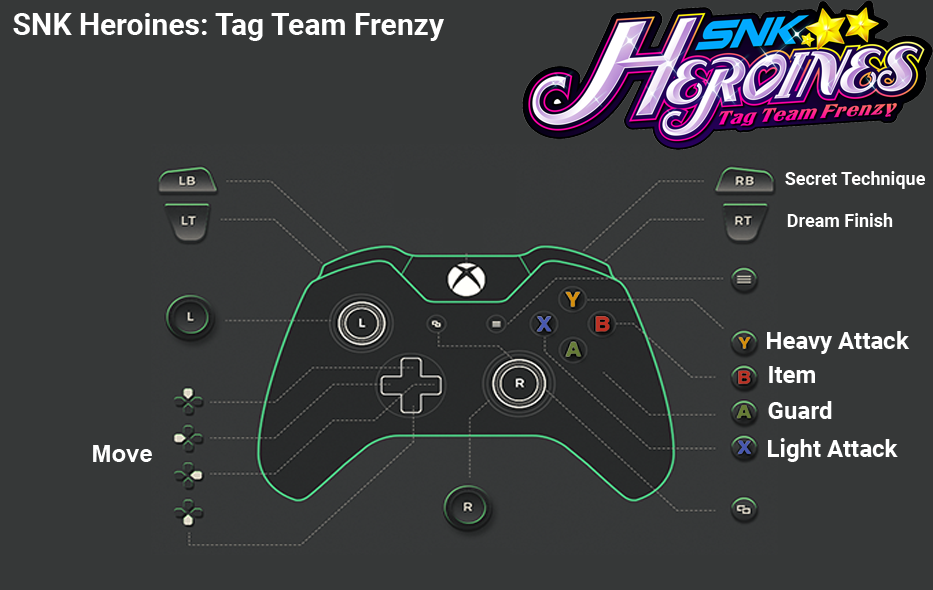
<style>
.page{position:relative;width:933px;height:590px;background:#363838}
.page>*{position:absolute;margin:0}
.t1{font:30px "Roboto-Bold";color:#ffffff}
.t2{font:18px "Roboto-Bold";color:#ffffff}
.t3{font:24px "Roboto-Bold";color:#ffffff}
.t4{font:24px "Arial-BoldMT";color:#fefefe}
</style>
<div class="page">
<p class="t1" style="left:13px;top:13px;width:431px;height:28px">SNK Heroines: Tag Team Frenzy</p>
<p class="t2" style="left:785px;top:171px;width:140px;height:18px">Secret Technique</p>
<p class="t2" style="left:787px;top:213px;width:106px;height:14px">Dream Finish</p>
<p class="t3" style="left:767px;top:331px;width:143px;height:23px">Heavy Attack</p>
<p class="t3" style="left:769px;top:366px;width:46px;height:17px">Item</p>
<p class="t3" style="left:768px;top:401px;width:64px;height:18px">Guard</p>
<p class="t3" style="left:768px;top:438px;width:130px;height:24px">Light Attack</p>
<p class="t4" style="left:93px;top:445px;width:59px;height:17px">Move</p>
</div>
